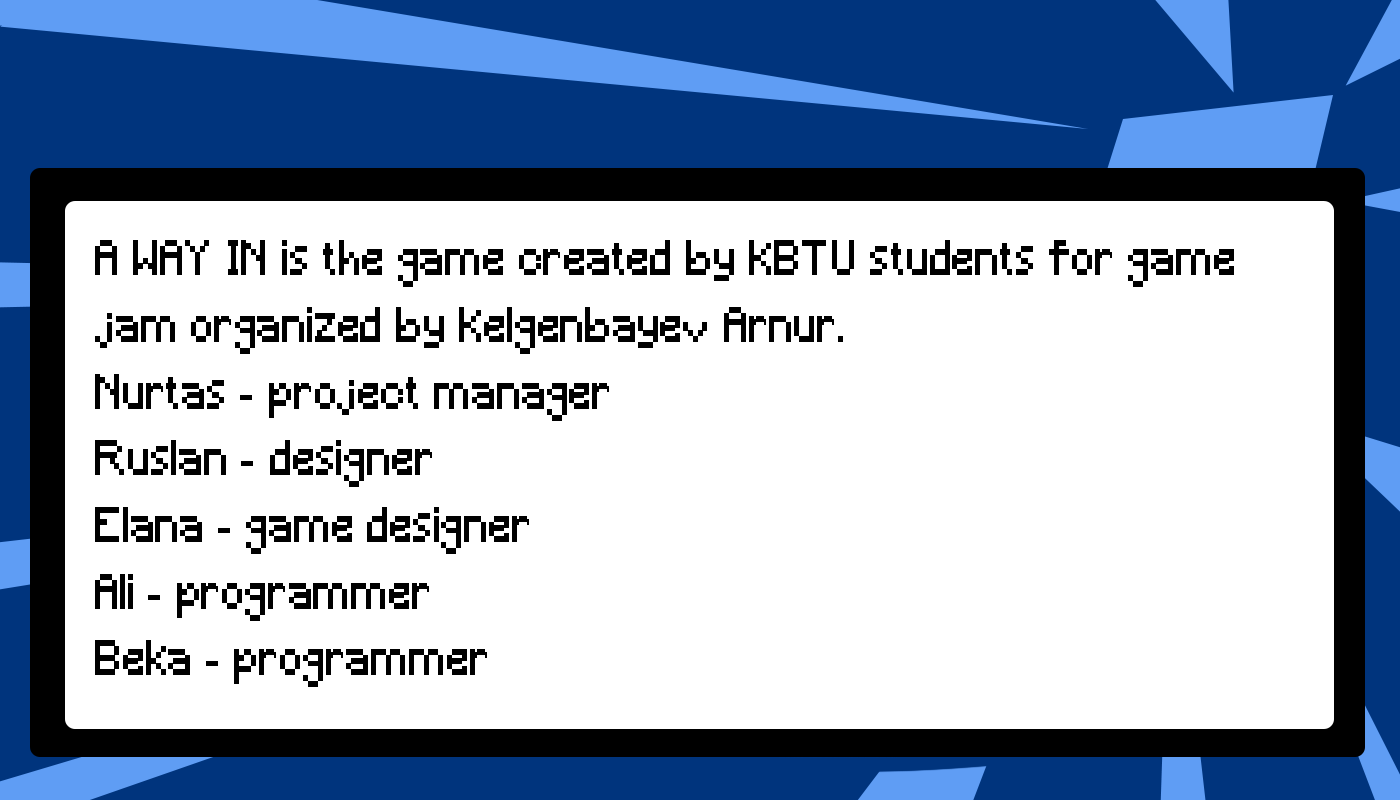
<style>
.page{position:relative;width:1400px;height:800px;background:#ffffff}
.page>*{position:absolute;margin:0}
.t1{font:45.8px/66.7px "Minecraft";letter-spacing:0.02em;color:#000000;scale:0.86 1}
</style>
<div class="page">
<p class="t1" style="left:95px;top:240px;width:1139px;height:447px">A WAY IN is the game created by KBTU students for game jam organized by Kelgenbayev Arnur.<br>Nurtas - project manager<br>Ruslan - designer<br>Elana - game designer<br>Ali - programmer<br>Beka - programmer</p>
</div>
